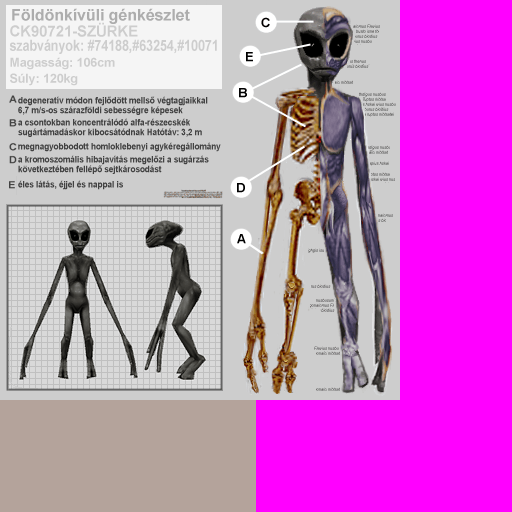
<style>
.page{position:relative;width:512px;height:512px;background:#ff00ff}
.page>*{position:absolute;margin:0}
.t1{font:16px "Arial-BoldMT";letter-spacing:-0.005em;color:#adadad}
.t2{font:15.3px/14.2px "Arial-BoldMT";letter-spacing:-0.005em;color:#cdcdcd;scale:0.82 1}
.t3{font:15.3px/14.2px "Arial-BoldMT";letter-spacing:-0.005em;color:#cdcdcd}
.t4{font:12.4px/16px "Arial-BoldMT";letter-spacing:-0.005em;color:#cdcdcd}
.t5{font:8.9px/9.6px "Arial-BoldMT";letter-spacing:-0.005em;color:#424242;scale:0.92 1}
.t6{font:8.9px "Arial-BoldMT";letter-spacing:-0.005em;color:#424242;scale:0.92 1}
</style>
<div class="page">
<p class="t1" style="left:12px;top:8px;width:178px;height:16px">Földönkívüli génkészlet</p>
<p class="t2" style="left:9px;top:22px;width:208px;height:64px"><span class="t3">CK90721-SZÜRKE<br></span>szabványok: #74188,#63254,#10071<br><span class="t4">Magasság: 106cm<br>Súly: 120kg</span></p>
<p class="t5" style="left:18px;top:96px;width:190px;height:19px">degeneratív módon fejlődött mellső végtagjaikkal<br>6,7 m/s-os szárazföldi sebességre képesek</p>
<p class="t5" style="left:18px;top:118px;width:184px;height:19px">a csontokban koncentrálódó alfa-részecskék sugártámadáskor kibocsátódnak Hatótáv: 3,2 m</p>
<p class="t6" style="left:18px;top:142px;width:203px;height:10px">megnagyobbodott homloklebenyi agykéregállomány</p>
<p class="t5" style="left:18px;top:155px;width:191px;height:19px">a kromoszomális hibajavítás megelőzi a sugárzás következtében fellépő sejtkárosodást</p>
<p class="t6" style="left:18px;top:180px;width:105px;height:10px">éles látás, éjjel és nappal is</p>
</div>
